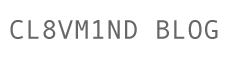
<style>
.page{position:relative;width:230px;height:61px;background:#ffffff}
.page>*{position:absolute;margin:0}
.t1{font:27px "AndaleMono";color:#676767;text-transform:uppercase}
</style>
<div class="page">
<p class="t1" style="left:10px;top:20px;width:208px;height:19px">Cl8vM1nd Blog</p>
</div>
